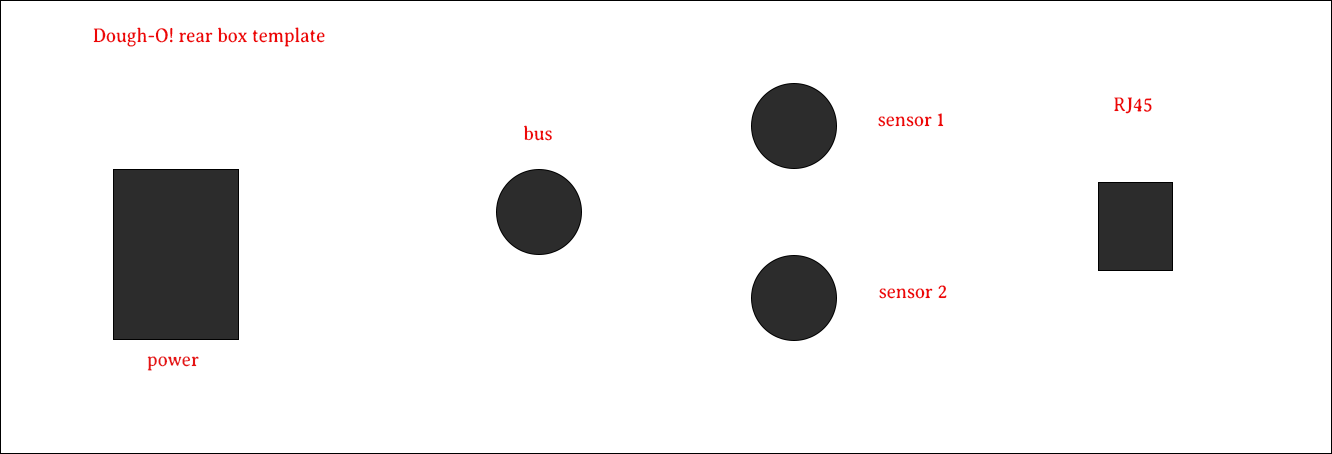
<style>
.page{position:relative;width:1332px;height:454px;background:#ffffff}
.page>*{position:absolute;margin:0}
.t1{font:20px "AveriaSerifLibre-Regular";color:#ed0707;scale:0.91 1}
.t2{font:20px "AveriaSerifLibre-Regular";color:#e51515;scale:0.91 1}
</style>
<div class="page">
<p class="t1" style="left:93px;top:27px;width:232px;height:20px">Dough-O! rear box template</p>
<p class="t1" style="left:1114px;top:97px;width:38px;height:17px">RJ45</p>
<p class="t1" style="left:878px;top:113px;width:66px;height:14px">sensor 1</p>
<p class="t1" style="left:524px;top:125px;width:28px;height:16px">bus</p>
<p class="t1" style="left:879px;top:285px;width:68px;height:14px">sensor 2</p>
<p class="t2" style="left:147px;top:356px;width:52px;height:15px">power</p>
</div>
